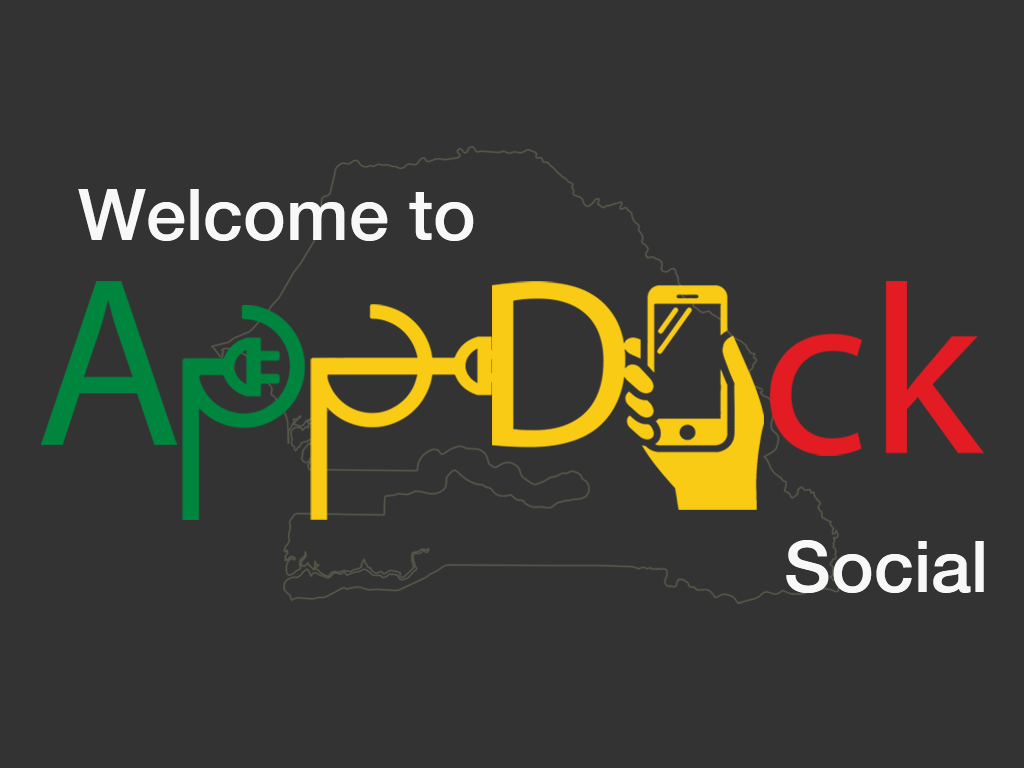
<style>
.page{position:relative;width:1024px;height:768px;background:#333333}
.page>*{position:absolute;margin:0}
.t1{font:72px "HelveticaNeueLTPro-Md";color:#f8f8f8}
</style>
<div class="page">
<p class="t1" style="left:78px;top:189px;width:396px;height:52px">Welcome to</p>
<p class="t1" style="left:786px;top:540px;width:198px;height:53px">Social</p>
</div>
